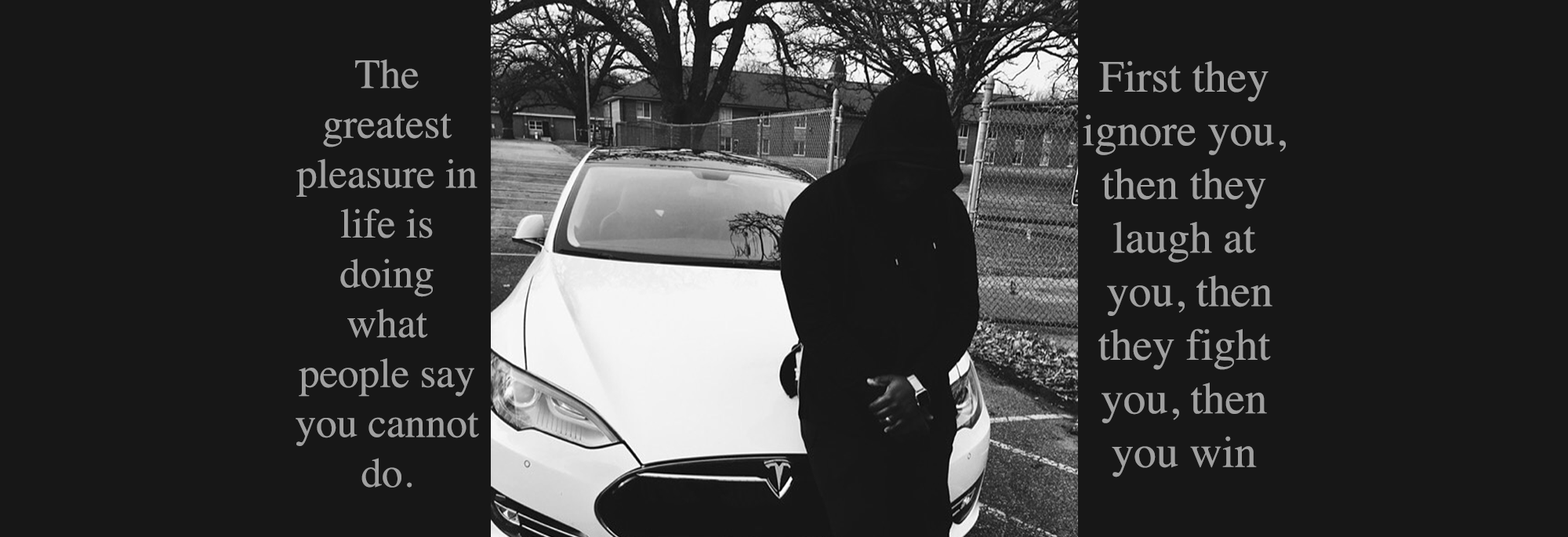
<style>
.page{position:relative;width:1568px;height:537px;background:#171717}
.page>*{position:absolute;margin:0}
.t1{font:41.6px "Times-Roman";color:#a0a0a0}
.t2{font:44.7px "Times-Roman";color:#a0a0a0}
</style>
<div class="page">
<p class="t1" style="left:296px;top:59px;width:183px;height:429px;text-align:center">The <br>greatest pleasure in life is doing what people say you cannot do.</p>
<p class="t2" style="left:1083px;top:60px;width:203px;height:417px;text-align:center">First they <br>ignore you, <br>then they laugh at<br> you, then they fight <br>you, then you win</p>
</div>
